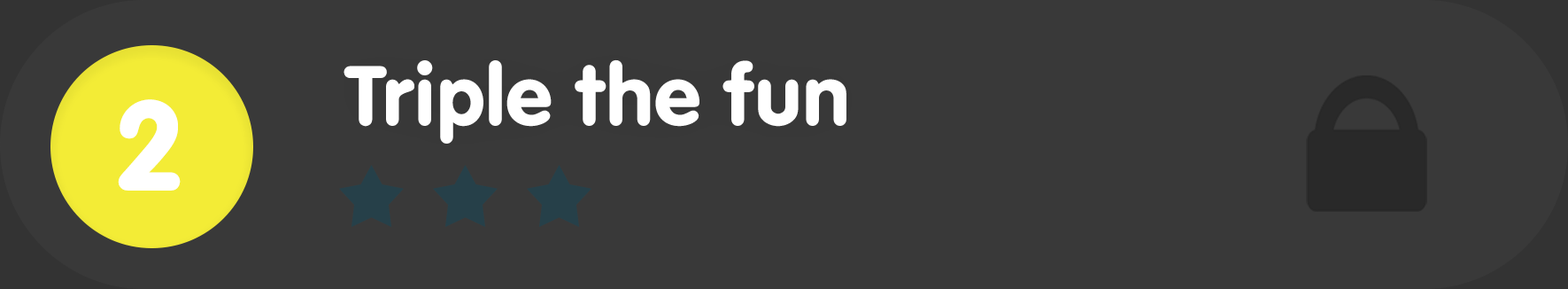
<style>
.page{position:relative;width:1568px;height:289px;background:#393939}
.page>*{position:absolute;margin:0}
.t1{font:88.5px "VAGRundschriftD";color:#ffffff}
.t2{font:132.8px "VAGRundschriftD";color:#ffffff}
</style>
<div class="page">
<p class="t1" style="left:344px;top:59px;width:502px;height:84px">Triple the fun</p>
<p class="t2" style="left:118px;top:99px;width:63px;height:91px">2</p>
</div>
